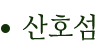
<style>
.page{position:relative;width:97px;height:55px;background:#ffffff}
.page>*{position:absolute;margin:0}
.t1{font:28px "Arita-buri-Medium_TTF";color:#133108;scale:0.96 1}
</style>
<div class="page">
<p class="t1" style="left:22px;top:13px;width:73px;height:28px">산호섬</p>
</div>
